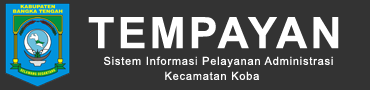
<style>
.page{position:relative;width:370px;height:90px;background:#333333}
.page>*{position:absolute;margin:0}
.t1{font:43.3px "Arial-BoldMT";letter-spacing:0.075em;color:#ffffff}
.t2{font:11px "ArialMT";letter-spacing:0.075em;color:#ffffff}
</style>
<div class="page">
<p class="t1" style="left:88px;top:17px;width:251px;height:32px">TEMPAYAN</p>
<p class="t2" style="left:104px;top:56px;width:229px;height:12px">Sistem Informasi Pelayanan Administrasi</p>
<p class="t2" style="left:165px;top:71px;width:94px;height:9px">Kecamatan Koba</p>
</div>
